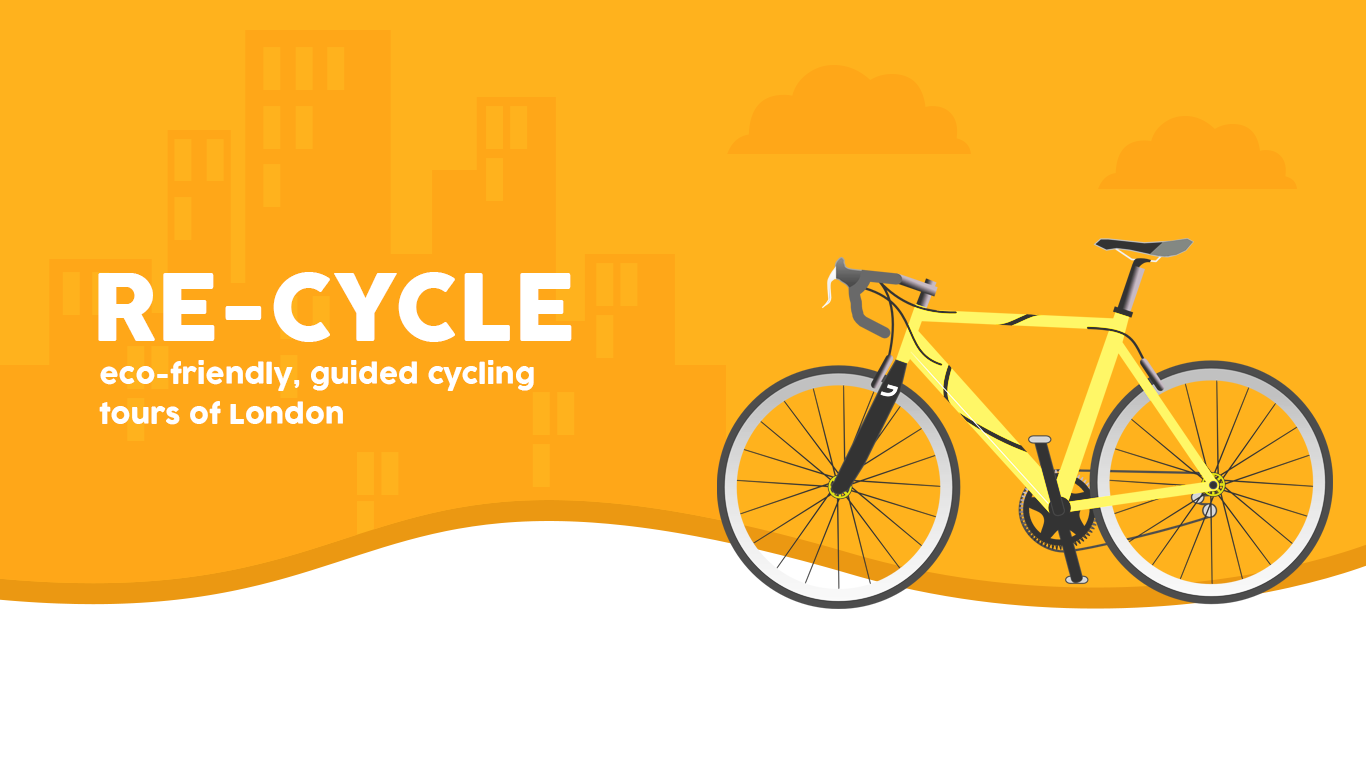
<style>
.page{position:relative;width:1366px;height:768px;background:#ffb21d}
.page>*{position:absolute;margin:0}
.t1{font:92px "Cocogoose";color:#ffffff;text-transform:uppercase}
.t2{font:27px/40px "Cocogoose";color:#ffffff}
</style>
<div class="page">
<p class="t1" style="left:98px;top:272px;width:474px;height:70px">re-cycle</p>
<p class="t2" style="left:99px;top:360px;width:435px;height:65px">eco-friendly, guided cycling <br>tours of London</p>
</div>
